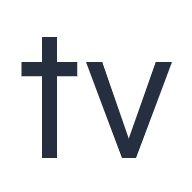
<style>
.page{position:relative;width:192px;height:192px;background:#ffffff}
.page>*{position:absolute;margin:0}
.t1{font:192px "Syne-Regular";color:#252f3f}
</style>
<div class="page">
<p class="t1" style="left:21px;top:37px;width:151px;height:121px">tv</p>
</div>
